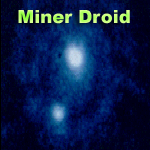
<style>
.page{position:relative;width:150px;height:150px}
.page>*{position:absolute;margin:0}
.t1{font:18px "Arial-Black"}
</style>
<div class="page">
<p class="t1" style="left:18px;top:10px;width:112px;height:14px">Miner Droid</p>
</div>
